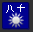
<style>
.page{position:relative;width:33px;height:32px;background:#000090}
.page>*{position:absolute;margin:0}
.t1{font:10.4px "SimSun";color:#ffffff}
</style>
<div class="page">
<p class="t1" style="left:6px;top:4px;width:19px;height:9px">八十</p>
</div>
